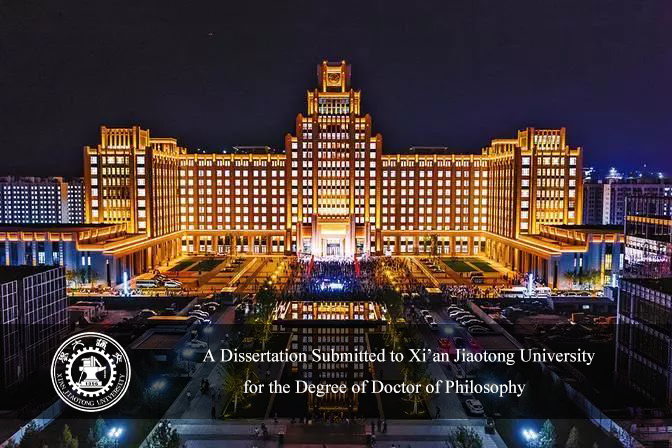
<style>
.page{position:relative;width:672px;height:448px}
.page>*{position:absolute;margin:0}
.t1{font:18px "TimesNewRomanPSMT";color:#ffffff}
</style>
<div class="page">
<p class="t1" style="left:202px;top:348px;width:393px;height:49px">A Dissertation Submitted to Xi’an Jiaotong University <br>         for the Degree of Doctor of Philosophy</p>
</div>
